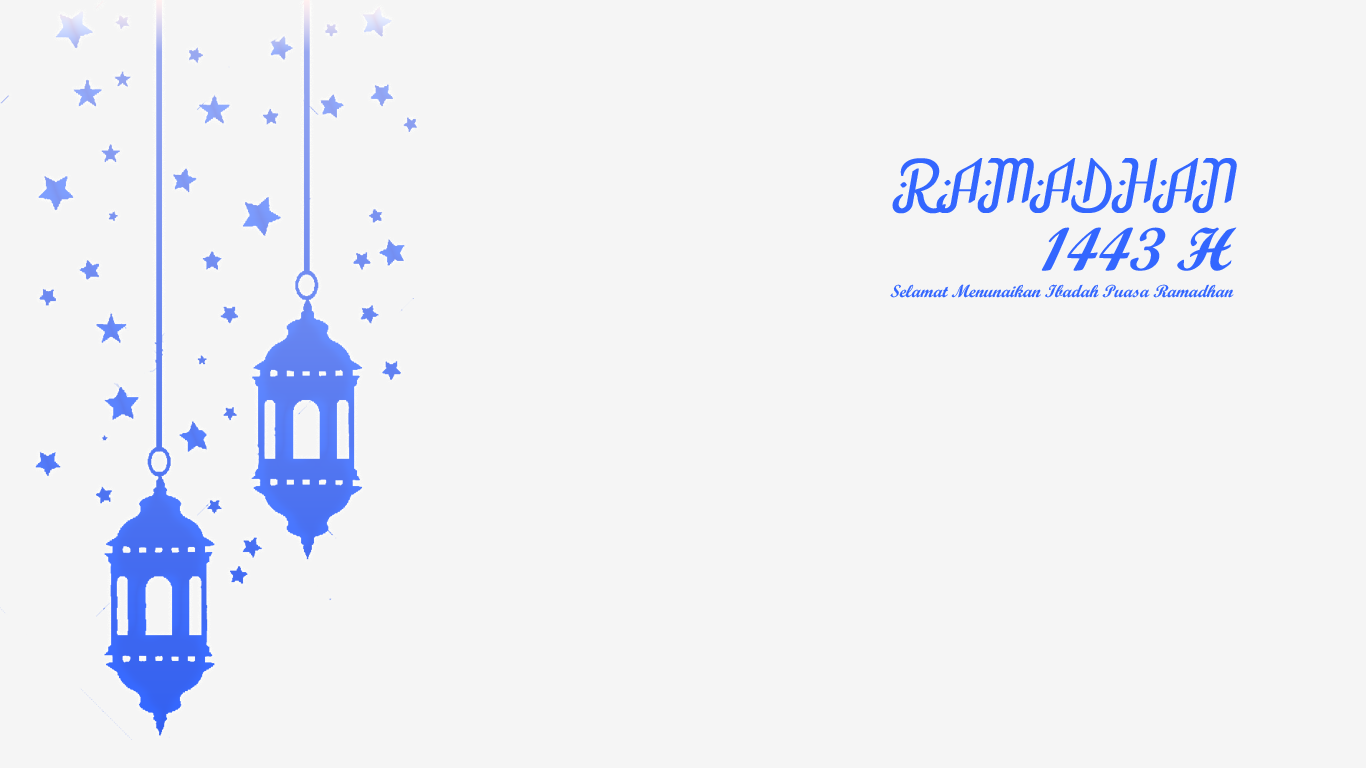
<style>
.page{position:relative;width:1366px;height:768px;background:#f5f5f5}
.page>*{position:absolute;margin:0}
.t1{font:54.4px "RamadhanAmazing";color:#3366ff;font-weight:bold;font-style:italic}
.t2{font:60.9px "ScriptMTBold";color:#3366ff;font-style:italic}
.t3{font:17.5px "ScriptMTBold";color:#3366ff;font-style:italic}
</style>
<div class="page">
<p class="t1" style="left:892px;top:158px;width:345px;height:56px">RAMADHAN</p>
<p class="t2" style="left:1041px;top:227px;width:196px;height:44px">1443 H</p>
<p class="t3" style="left:890px;top:284px;width:344px;height:14px">Selamat Menunaikan Ibadah Puasa Ramadhan</p>
</div>
